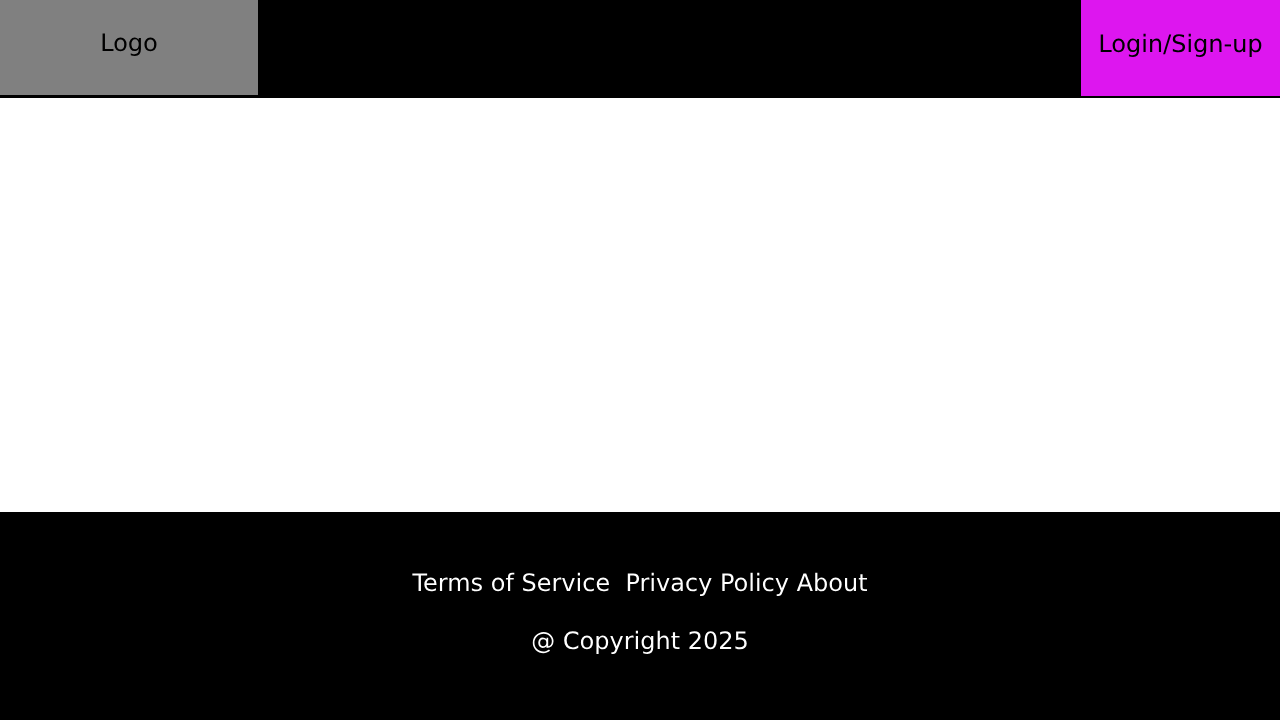
<style>
.page{position:relative;width:1280px;height:720px;background:#ffffff}
.page>*{position:absolute;margin:0}
.t1{font:24px "DejaVuSans";color:#000000}
.t2{font:24px "DejaVuSans";color:#ffffff}
</style>
<div class="page">
<p class="t1" style="left:102px;top:33px;width:55px;height:23px">Logo</p>
<p class="t1" style="left:1100px;top:33px;width:162px;height:24px">Login/Sign-up</p>
<p class="t2" style="left:412px;top:572px;width:456px;height:82px;text-align:center">Terms of Service  Privacy Policy About<br><br>@ Copyright 2025</p>
</div>
